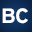
<style>
.page{position:relative;width:32px;height:32px}
.page>*{position:absolute;margin:0}
.t1{font:20.8px "Interstate-Bold";color:#ffffff}
</style>
<div class="page">
<p class="t1" style="left:2px;top:8px;width:26px;height:16px">BC</p>
</div>
